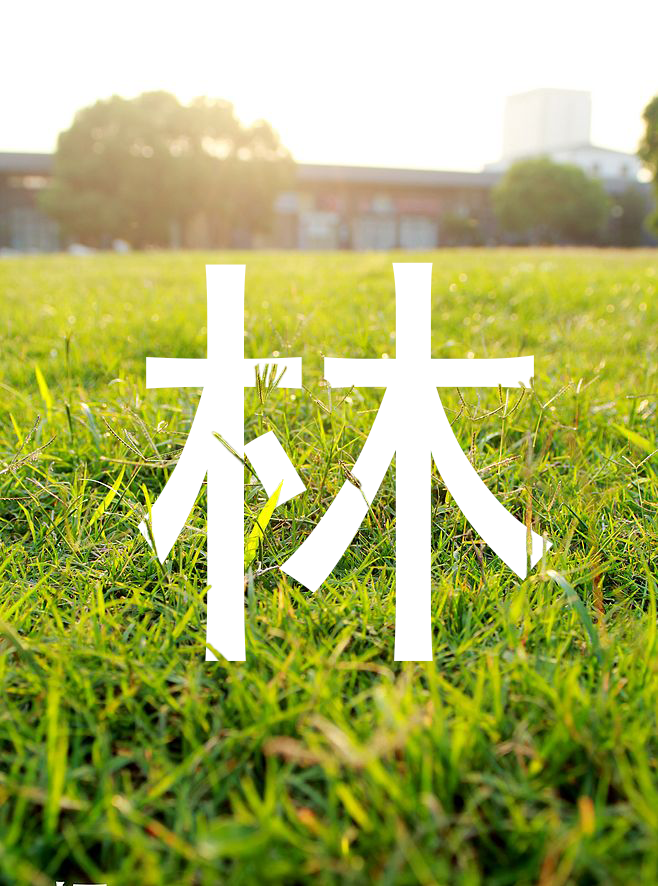
<style>
.page{position:relative;width:658px;height:886px;background:#ffffff}
.page>*{position:absolute;margin:0}
.t1{font:446.9px "SimHei";letter-spacing:0.18em;color:#ffffff}
</style>
<div class="page">
<p class="t1" style="left:137px;top:262px;width:417px;height:399px">林</p>
</div>
